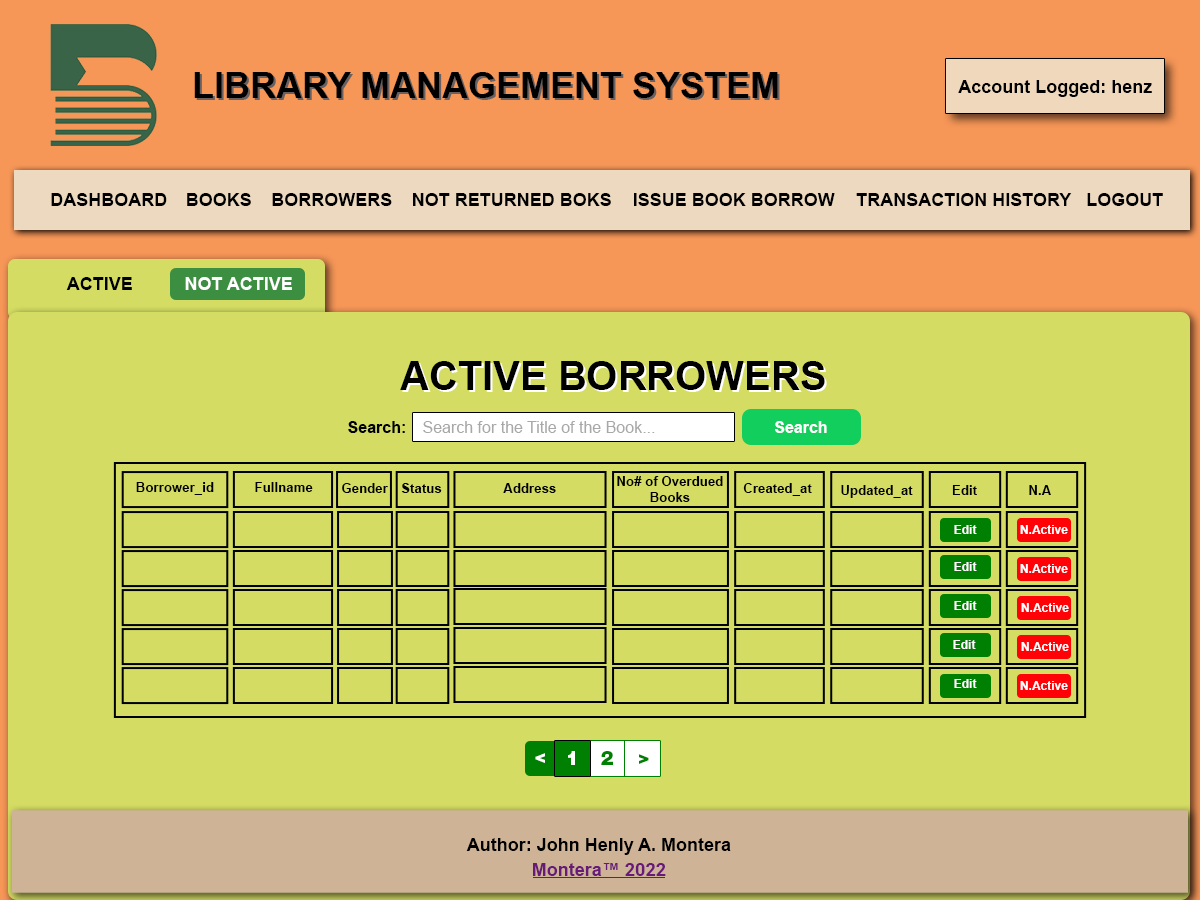
<style>
.page{position:relative;width:1200px;height:900px;background:#d4dc63}
.page>*{position:absolute;margin:0}
.t1{font:36px "Arial-BoldMT";color:#000000}
.t2{font:18px "Arial-BoldMT";color:#000000}
.t3{font:18px "Arial-BoldMT";color:#ffffff}
.t4{font:40px "Arial-BoldMT";color:#000000}
.t5{font:16px "Arial-BoldMT";color:#000000}
.t6{font:16px "ArialMT";color:#a8a8a8}
.t7{font:16px "Arial-BoldMT";color:#ffffff}
.t8{font:13.3px "Arial-BoldMT";color:#000000}
.t9{font:12px "Arial-BoldMT";color:#ffffff}
.t10{font:18.8px "HelveticaNeueLTStd-Blk";color:#ffffff}
.t11{font:18.8px "HelveticaNeueLTStd-Blk";color:#008002}
.t12{font:18px "Arial-BoldMT";color:#681a79}
.t13{font:18px "Roboto-Bold";color:#681a79}
</style>
<div class="page">
<p class="t1" style="left:194px;top:72px;width:584px;height:26px">LIBRARY MANAGEMENT SYSTEM</p>
<p class="t2" style="left:958px;top:80px;width:194px;height:17px">Account Logged: henz</p>
<p class="t2" style="left:51px;top:193px;width:116px;height:13px">DASHBOARD</p>
<p class="t2" style="left:187px;top:193px;width:64px;height:13px">BOOKS</p>
<p class="t2" style="left:272px;top:193px;width:120px;height:13px">BORROWERS</p>
<p class="t2" style="left:413px;top:193px;width:198px;height:13px">NOT RETURNED BOKS</p>
<p class="t2" style="left:634px;top:193px;width:201px;height:13px">ISSUE BOOK BORROW</p>
<p class="t2" style="left:856px;top:193px;width:216px;height:13px">TRANSACTION HISTORY</p>
<p class="t2" style="left:1087px;top:193px;width:76px;height:13px">LOGOUT</p>
<p class="t2" style="left:66px;top:277px;width:66px;height:13px">ACTIVE</p>
<p class="t3" style="left:185px;top:277px;width:107px;height:13px">NOT ACTIVE</p>
<p class="t4" style="left:400px;top:361px;width:425px;height:29px">ACTIVE BORROWERS</p>
<p class="t5" style="left:348px;top:421px;width:57px;height:12px">Search:</p>
<p class="t6" style="left:423px;top:421px;width:232px;height:12px">Search for the Title of the Book...</p>
<p class="t7" style="left:775px;top:421px;width:52px;height:12px">Search</p>
<p class="t8" style="left:136px;top:482px;width:78px;height:13px">Borrower_id</p>
<p class="t8" style="left:255px;top:482px;width:58px;height:10px">Fullname</p>
<p class="t8" style="left:342px;top:483px;width:46px;height:10px">Gender</p>
<p class="t8" style="left:401px;top:483px;width:41px;height:10px">Status</p>
<p class="t8" style="left:503px;top:483px;width:53px;height:10px">Address</p>
<p class="t8" style="left:617px;top:476px;width:106px;height:26px;text-align:center">No# of Overdued<br>Books</p>
<p class="t8" style="left:743px;top:483px;width:69px;height:13px">Created_at</p>
<p class="t8" style="left:841px;top:485px;width:72px;height:13px">Updated_at</p>
<p class="t8" style="left:952px;top:485px;width:25px;height:10px">Edit</p>
<p class="t8" style="left:1029px;top:485px;width:22px;height:10px">N.A</p>
<p class="t9" style="left:954px;top:525px;width:23px;height:9px">Edit</p>
<p class="t9" style="left:1020px;top:525px;width:48px;height:9px">N.Active</p>
<p class="t9" style="left:954px;top:562px;width:23px;height:9px">Edit</p>
<p class="t9" style="left:1020px;top:564px;width:48px;height:9px">N.Active</p>
<p class="t9" style="left:954px;top:601px;width:23px;height:9px">Edit</p>
<p class="t9" style="left:1021px;top:603px;width:48px;height:9px">N.Active</p>
<p class="t9" style="left:953px;top:640px;width:23px;height:9px">Edit</p>
<p class="t9" style="left:1021px;top:642px;width:48px;height:9px">N.Active</p>
<p class="t9" style="left:954px;top:679px;width:23px;height:9px">Edit</p>
<p class="t9" style="left:1020px;top:681px;width:48px;height:9px">N.Active</p>
<p class="t10" style="left:535px;top:753px;width:10px;height:10px">&lt;</p>
<p class="t10" style="left:568px;top:751px;width:7px;height:14px">1</p>
<p class="t11" style="left:601px;top:751px;width:12px;height:14px">2</p>
<p class="t11" style="left:639px;top:754px;width:10px;height:10px">&gt;</p>
<p class="t2" style="left:466px;top:838px;width:265px;height:17px">Author: John Henly A. Montera</p>
<p class="t12" style="left:533px;top:863px;width:133px;height:13px">Montera™ <span class="t13">2022</span></p>
</div>
